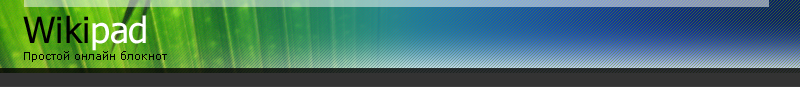
<style>
.page{position:relative;width:800px;height:87px}
.page>*{position:absolute;margin:0}
.t1{font:36px "Tahoma";color:#000000}
.t2{font:36px "Tahoma";color:#ffffff}
.t3{font:11px "Verdana";color:#000000}
</style>
<div class="page">
<p class="t1" style="left:23px;top:15px;width:123px;height:36px">Wiki<span class="t2">pad</span></p>
<p class="t3" style="left:24px;top:51px;width:143px;height:11px">Простой онлайн блокнот</p>
</div>
